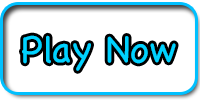
<style>
.page{position:relative;width:200px;height:100px;background:#ffffff}
.page>*{position:absolute;margin:0}
.t1{font:37.5px "Chalkboard";color:#00d2ff}
</style>
<div class="page">
<p class="t1" style="left:22px;top:35px;width:154px;height:36px">Play Now</p>
</div>
